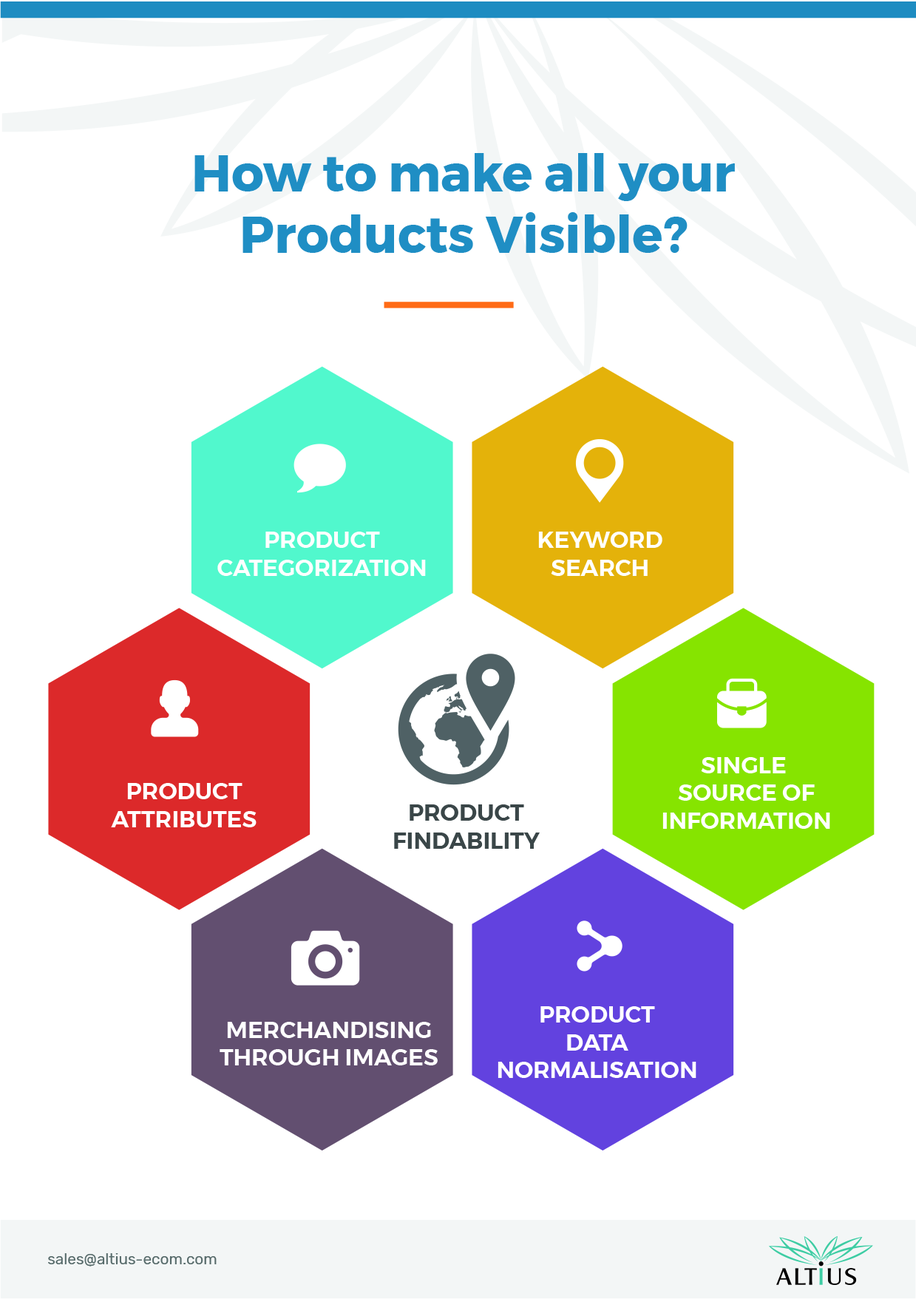
<style>
.page{position:relative;width:916px;height:1302px;background:#ffffff}
.page>*{position:absolute;margin:0}
.t1{font:50.8px "Montserrat-Bold";color:#1f8dc4}
.t2{font:23.1px "Montserrat-SemiBold";color:#ffffff;text-transform:uppercase}
.t3{font:23.1px "Montserrat-SemiBold";color:#3a4648;text-transform:uppercase}
.t4{font:15.4px "Rubik-Regular";color:#576a6b}
</style>
<div class="page">
<p class="t1" style="left:194px;top:153px;width:541px;height:100px;text-align:center">How to make all your<br>Products Visible?</p>
<p class="t2" style="left:217px;top:532px;width:209px;height:44px;text-align:center">Product<br>Categorization</p>
<p class="t2" style="left:538px;top:532px;width:124px;height:44px;text-align:center">Keyword<br>Search</p>
<p class="t2" style="left:662px;top:757px;width:168px;height:72px;text-align:center">Single <br>Source of<br>Information</p>
<p class="t2" style="left:111px;top:783px;width:146px;height:44px;text-align:center">Product<br>Attributes</p>
<p class="t3" style="left:394px;top:804px;width:146px;height:45px;text-align:center">product<br>findability</p>
<p class="t2" style="left:498px;top:1006px;width:198px;height:72px;text-align:center">Product<br>Data<br>normalisation</p>
<p class="t2" style="left:220px;top:1022px;width:218px;height:43px;text-align:center">merchandising<br>through images</p>
<p class="t4" style="left:48px;top:1253px;width:169px;height:13px">sales@altius-ecom.com</p>
</div>
